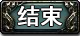
<style>
.page{position:relative;width:80px;height:36px}
.page>*{position:absolute;margin:0}
.t1{font:22.5px "SimHei";letter-spacing:-0.125em;color:#ffffff;font-weight:bold}
</style>
<div class="page">
<p class="t1" style="left:17px;top:5px;width:45px;height:21px">结 束</p>
</div>
